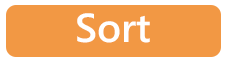
<style>
.page{position:relative;width:227px;height:61px;background:#f29844}
.page>*{position:absolute;margin:0}
.t1{font:40.5px "YuGothicUI-Semibold";color:#ffffff}
</style>
<div class="page">
<p class="t1" style="left:77px;top:13px;width:73px;height:30px">Sort</p>
</div>
